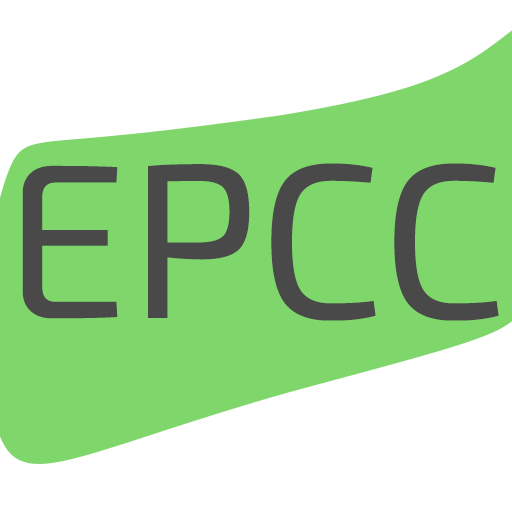
<style>
.page{position:relative;width:512px;height:512px;background:#7fd66b}
.page>*{position:absolute;margin:0}
.t1{font:220px "Exo2-Regular";color:#494949}
</style>
<div class="page">
<p class="t1" style="left:22px;top:163px;width:477px;height:158px">EPCC</p>
</div>
